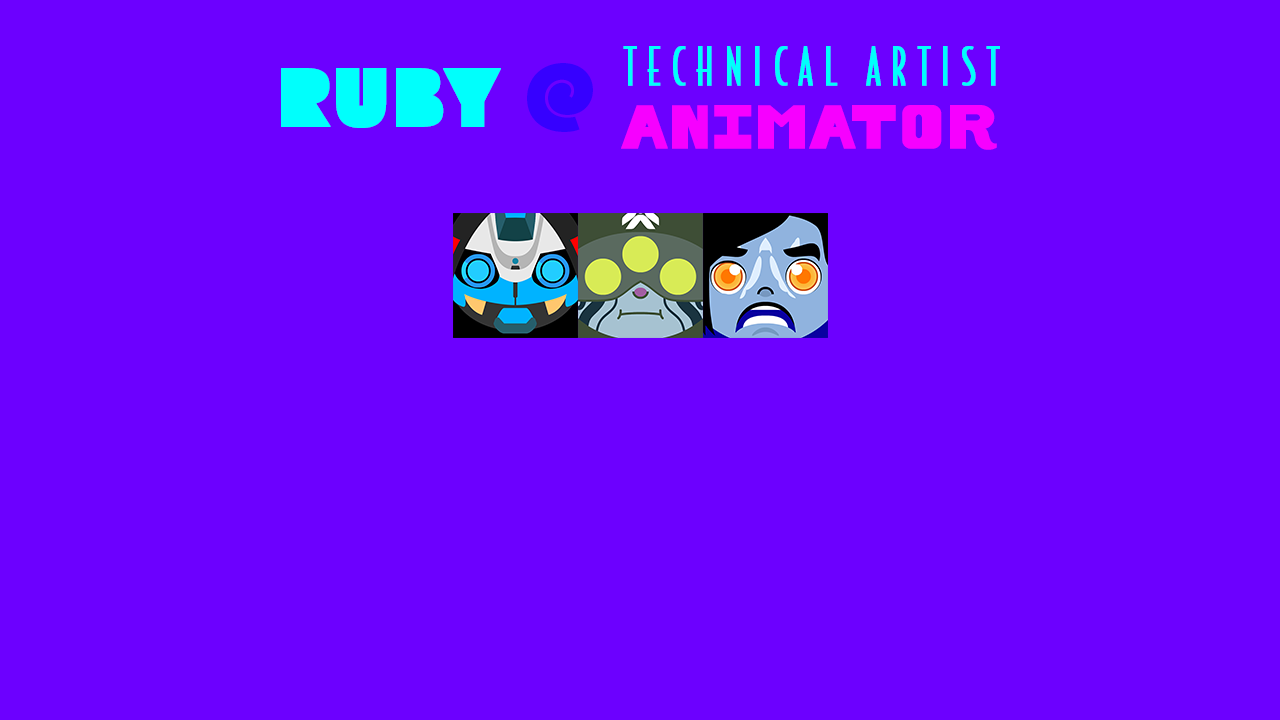
<style>
.page{position:relative;width:1280px;height:720px;background:#6c00ff}
.page>*{position:absolute;margin:0}
.t1{font:50px "BodegaSans-Light";letter-spacing:0.21em;color:#00fffc;font-weight:bold}
.t2{font:83px "Flegrei-Regular";color:#3600ff}
.t3{font:83px "Flegrei-Regular";color:#00fffc;font-weight:bold}
.t4{font:60px "BadTyp-Regular";color:#f600ff;font-weight:bold}
</style>
<div class="page">
<p class="t1" style="left:623px;top:46px;width:377px;height:40px">TECHNICAL ARTIST</p>
<p class="t2" style="left:527px;top:63px;width:66px;height:69px">@</p>
<p class="t3" style="left:281px;top:68px;width:220px;height:60px">RUBY</p>
<p class="t4" style="left:621px;top:105px;width:376px;height:45px">ANIMATOR</p>
</div>
